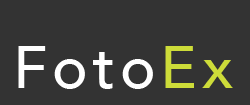
<style>
.page{position:relative;width:250px;height:105px;background:#333333}
.page>*{position:absolute;margin:0}
.t1{font:60px "Avenir-Medium";letter-spacing:0.08em;color:#ffffff}
.t2{font:60px "Avenir-Medium";letter-spacing:0.08em;color:#cddc39}
</style>
<div class="page">
<p class="t1" style="left:18px;top:46px;width:215px;height:43px">Foto<span class="t2">Ex</span></p>
</div>
